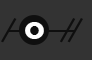
<style>
.page{position:relative;width:92px;height:60px;background:#333333}
.page>*{position:absolute;margin:0}
.t1{font:38.5px "Jaapokkienchance-Regular";letter-spacing:-0.01em;color:#ffffff}
</style>
<div class="page">
<p class="t1" style="left:25px;top:22px;width:19px;height:17px">o</p>
</div>
